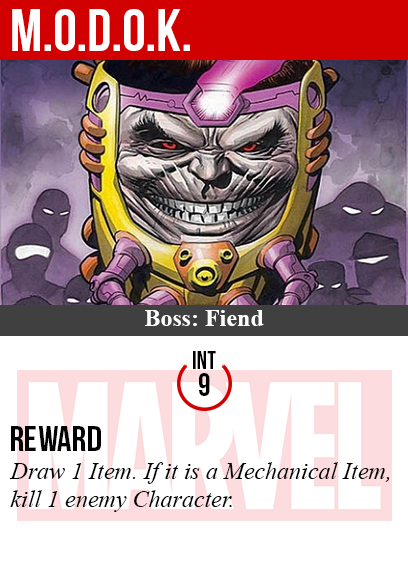
<style>
.page{position:relative;width:408px;height:585px;background:#ffffff}
.page>*{position:absolute;margin:0}
.t1{font:60px "BebasNeue";color:#ffffff}
.t2{font:24px "TimesNewRomanPS-BoldMT";color:#ffffff}
.t3{font:25px "BebasNeue";color:#000000}
.t4{font:32px "BebasNeue";color:#000000}
.t5{font:36px "BebasNeue";color:#000000}
.t6{font:24px "TimesNewRomanPS-ItalicMT";color:#000000}
</style>
<div class="page">
<p class="t1" style="left:12px;top:9px;width:178px;height:42px">m.o.d.o.k.</p>
<p class="t2" style="left:145px;top:310px;width:119px;height:16px">Boss: Fiend</p>
<p class="t3" style="left:193px;top:351px;width:23px;height:18px">int</p>
<p class="t4" style="left:199px;top:373px;width:11px;height:23px">9</p>
<p class="t5" style="left:11px;top:426px;width:90px;height:25px">reward</p>
<p class="t6" style="left:9px;top:462px;width:381px;height:50px">Draw 1 Item. If it is a Mechanical Item,<br>kill 1 enemy Character.</p>
</div>
